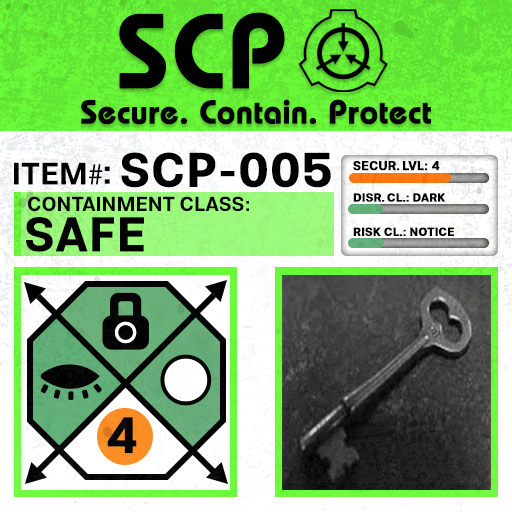
<style>
.page{position:relative;width:512px;height:512px}
.page>*{position:absolute;margin:0}
.t1{font:105.8px "BauhausLT-Demi";color:#000000;font-weight:bold}
.t2{font:33px "BauhausLT-Demi";color:#000000;font-weight:bold}
.t3{font:47.6px "Molde-Semibold";color:#000000;font-weight:bold}
.t4{font:12.5px "Molde-Semibold";color:#000000;font-weight:bold}
.t5{font:31.1px "Molde-Semibold";color:#000000}
.t6{font:31.1px "MyriadPro-Regular";color:#000000}
.t7{font:34.5px "Molde-Semibold";color:#000000}
.t8{font:20.3px "Molde-Semibold";color:#000000}
.t9{font:11.7px "Molde-Semibold";color:#000000;font-weight:bold}
.t10{font:47.8px "Molde-Semibold";color:#000000;font-weight:bold}
.t11{font:50px "Molde-Semibold";color:#000000;font-weight:bold}
</style>
<div class="page">
<p class="t1" style="left:119px;top:12px;width:166px;height:77px">SCP</p>
<p class="t2" style="left:81px;top:99px;width:350px;height:26px">Secure. Contain. Protect</p>
<p class="t3" style="left:121px;top:152px;width:210px;height:36px">SCP-005</p>
<p class="t4" style="left:353px;top:161px;width:87px;height:10px">SECUR. LVL: 4</p>
<p class="t5" style="left:14px;top:162px;width:89px;height:23px">ITEM<span class="t6">#</span></p>
<p class="t7" style="left:104px;top:166px;width:6px;height:18px">:</p>
<p class="t8" style="left:28px;top:196px;width:221px;height:16px">CONTAINMENT CLASS:</p>
<p class="t9" style="left:353px;top:193px;width:93px;height:9px">DISR. CL.: DARK</p>
<p class="t10" style="left:26px;top:217px;width:118px;height:35px">SAFE</p>
<p class="t9" style="left:353px;top:227px;width:101px;height:9px">RISK CL.: NOTICE</p>
<p class="t11" style="left:107px;top:417px;width:30px;height:36px">4</p>
</div>
